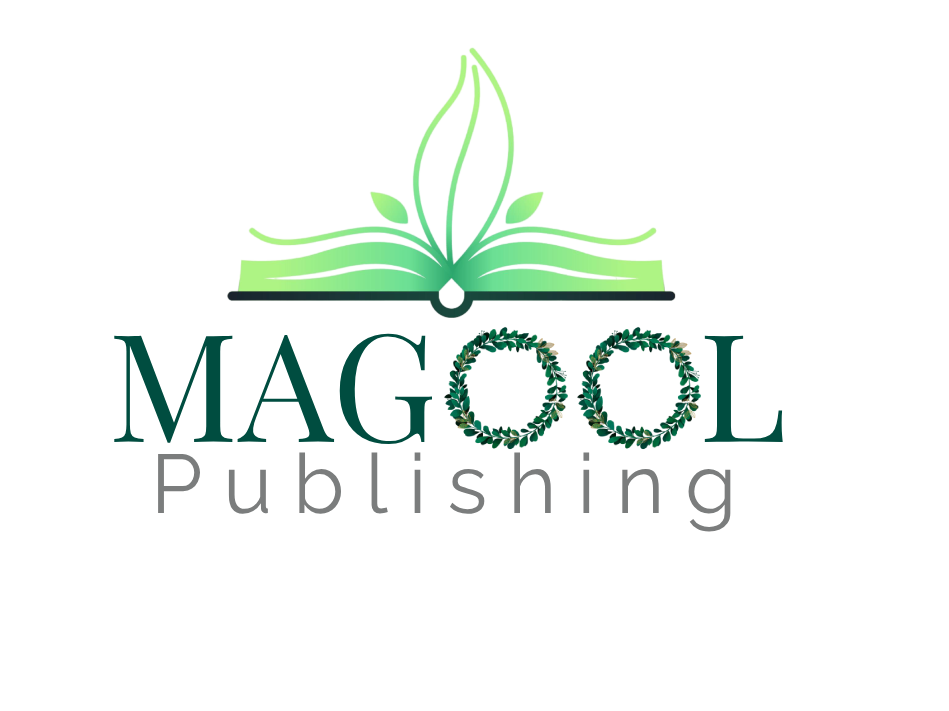
<style>
.page{position:relative;width:949px;height:711px;background:#ffffff}
.page>*{position:absolute;margin:0}
.t1{font:150px "PlayfairDisplay-Regular";color:#004d40}
.t2{font:83px "Raleway-Regular";letter-spacing:0.25em;color:#7b7d7d}
</style>
<div class="page">
<p class="t1" style="left:114px;top:333px;width:669px;height:112px">MAG       L</p>
<p class="t2" style="left:158px;top:452px;width:573px;height:80px">Publishing</p>
</div>
